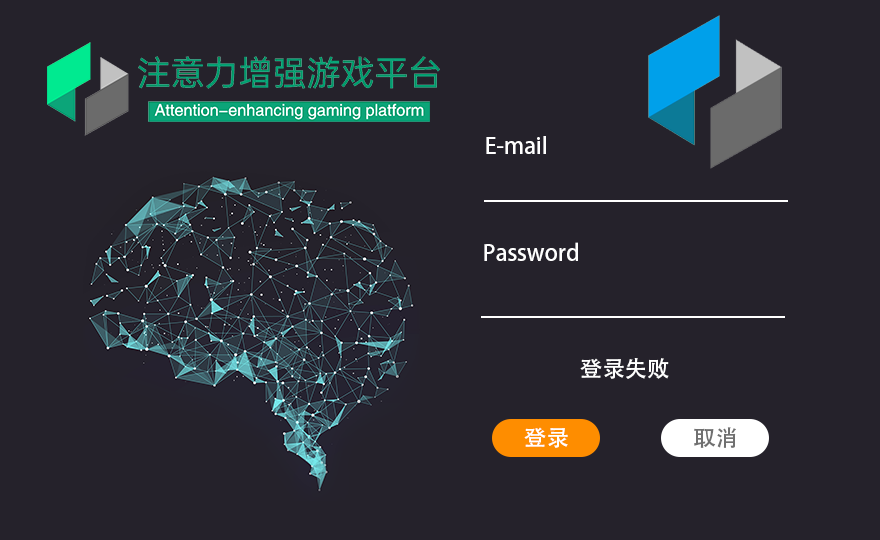
<style>
.page{position:relative;width:880px;height:540px;background:#25222b}
.page>*{position:absolute;margin:0}
.t1{font:22.4px "AdobeHeitiStd-Regular";color:#ffffff}
.t2{font:22.4px "AdobeHeitiStd-Regular";color:#707070}
</style>
<div class="page">
<p class="t1" style="left:486px;top:136px;width:60px;height:18px">E-mail</p>
<p class="t1" style="left:484px;top:242px;width:94px;height:19px">Password</p>
<p class="t1" style="left:580px;top:358px;width:89px;height:21px">登录失败</p>
<p class="t1" style="left:524px;top:427px;width:44px;height:21px">登录</p>
<p class="t2" style="left:694px;top:427px;width:42px;height:21px">取消</p>
</div>
